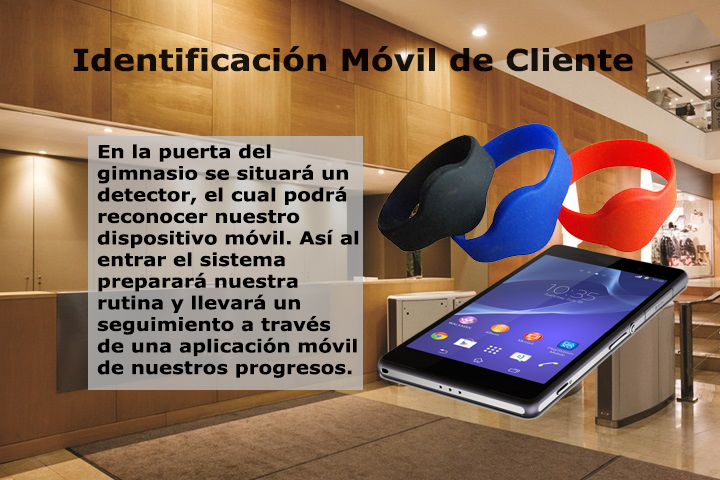
<style>
.page{position:relative;width:720px;height:480px}
.page>*{position:absolute;margin:0}
.t1{font:30px "Verdana-Bold";color:#000000;scale:1.1 1}
.t2{font:18px "Verdana-Bold";color:#000000;scale:1.1 1}
</style>
<div class="page">
<p class="t1" style="left:73px;top:46px;width:560px;height:26px;opacity:0.95">Identificación Móvil de Cliente</p>
<p class="t2" style="left:97px;top:144px;width:262px;height:234px">En la puerta del gimnasio se situará un detector, el cual podrá reconocer nuestro dispositivo móvil. Así al entrar el sistema preparará nuestra rutina y llevará un seguimiento a través de una aplicación móvil de nuestros progresos.</p>
</div>
